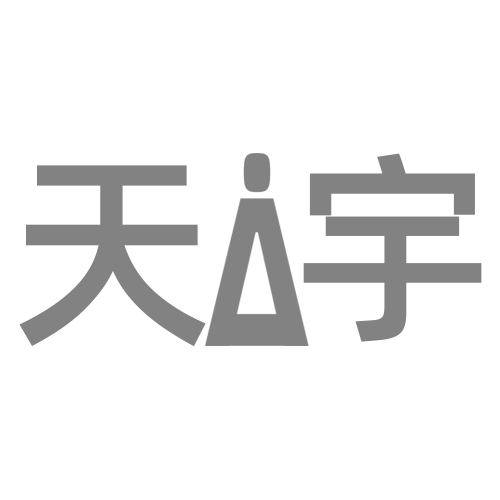
<style>
.page{position:relative;width:500px;height:500px;background:#ffffff}
.page>*{position:absolute;margin:0}
.t1{font:208.3px "AlibabaPuHuiTi-Medium";color:#828282}
</style>
<div class="page">
<p class="t1" style="left:19px;top:153px;width:463px;height:194px">天宇</p>
</div>
